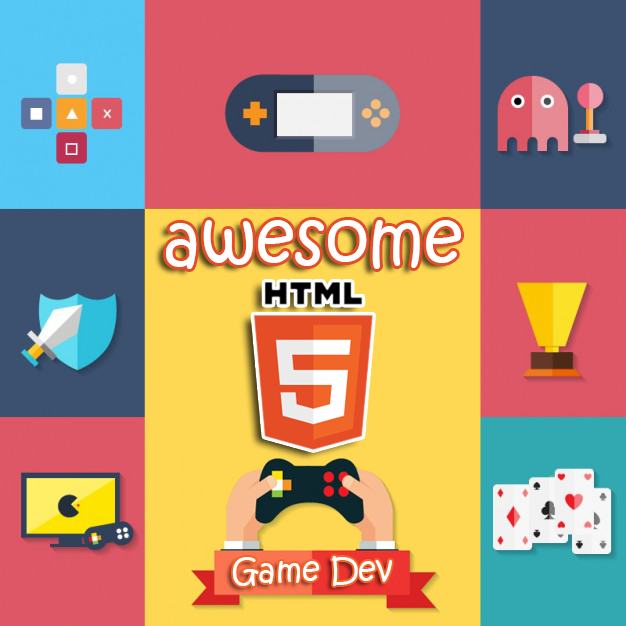
<style>
.page{position:relative;width:626px;height:626px;background:#de5766}
.page>*{position:absolute;margin:0}
.t1{font:69px "KristenITC-Regular";color:#ffffff}
.t2{font:32px "KristenITC-Regular";color:#ffffff}
</style>
<div class="page">
<p class="t1" style="left:166px;top:220px;width:295px;height:49px">awesome</p>
<p class="t2" style="left:232px;top:556px;width:160px;height:30px">Game Dev</p>
</div>
